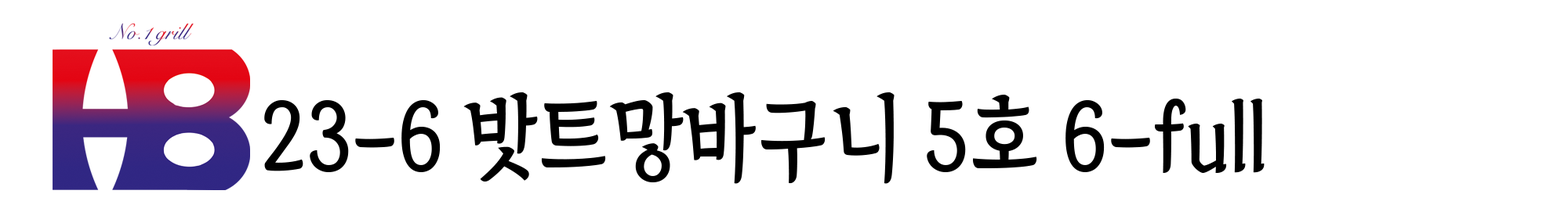
<style>
.page{position:relative;width:1568px;height:205px;background:#ffffff}
.page>*{position:absolute;margin:0}
.t1{font:93.7px "TheIndependenceHallofKorea-Regular";color:#000000;scale:0.89 1}
</style>
<div class="page">
<p class="t1" style="left:264px;top:93px;width:1001px;height:91px">23-6 밧트망바구니 5호 6-full</p>
</div>
